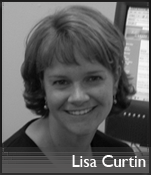
<style>
.page{position:relative;width:151px;height:175px}
.page>*{position:absolute;margin:0}
.t1{font:16.7px "GillSansMT";color:#fffefe}
</style>
<div class="page">
<p class="t1" style="left:72px;top:155px;width:74px;height:12px">Lisa Curtin</p>
</div>
